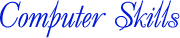
<style>
.page{position:relative;width:180px;height:38px;background:#ffffff}
.page>*{position:absolute;margin:0}
.t1{font:36px "UkrainianDecor";color:#0019d7}
</style>
<div class="page">
<p class="t1" style="left:0px;top:0px;width:180px;height:38px">Computer Skills</p>
</div>
